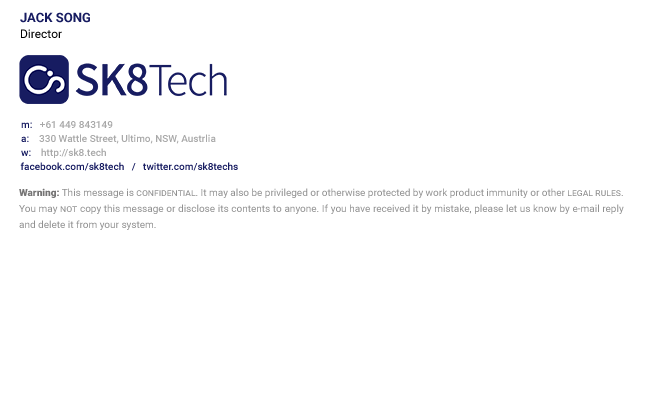
<style>
.page{position:relative;width:650px;height:400px;background:#ffffff}
.page>*{position:absolute;margin:0}
.t1{font:13px/16px "Roboto-Bold";color:#171c61;text-transform:uppercase}
.t2{font:12px/16px "Roboto-Regular";color:#010101}
.t3{font:10px/14px "Roboto-Medium";color:#a9a9a9}
.t4{font:10px/14px "Roboto-Medium";color:#171c61}
.t5{font:10px "Roboto-Medium";color:#171c61}
.t6{font:10px "Roboto-Medium";color:#a9a9a9}
.t7{font:10px/16px "Roboto-Regular";color:#919191}
.t8{font:10px/16px "Roboto-Black";color:#757474}
.t9{font:10px/16px "Roboto-Regular";color:#919191;font-variant:small-caps}
</style>
<div class="page">
<p class="t1" style="left:20px;top:12px;width:70px;height:26px">Jack song   <br><span class="t2">Director</span></p>
<p class="t3" style="left:21px;top:121px;width:195px;height:37px"><span class="t4">m:   </span>+61 449 843149<br><span class="t4">a:</span>    330 Wattle Street, Ultimo, NSW, Austrlia  <br><span class="t4">w:    </span>http://sk8.tech</p>
<p class="t5" style="left:20px;top:162px;width:218px;height:9px"><span class="t6">   </span>facebook.com/sk8tech   /   twitter.com/sk8techs</p>
<p class="t7" style="left:19px;top:188px;width:605px;height:42px;text-align:justify"><span class="t8">Warning:</span> This message is <span class="t9">confidential</span>. It may also be privileged or otherwise protected by work product immunity or other<span class="t9"> legal rules</span>. You may <span class="t9">not </span>copy this message or disclose its contents to anyone. If you have received it by mistake, please let us know by e-mail reply and delete it from your system.</p>
</div>
